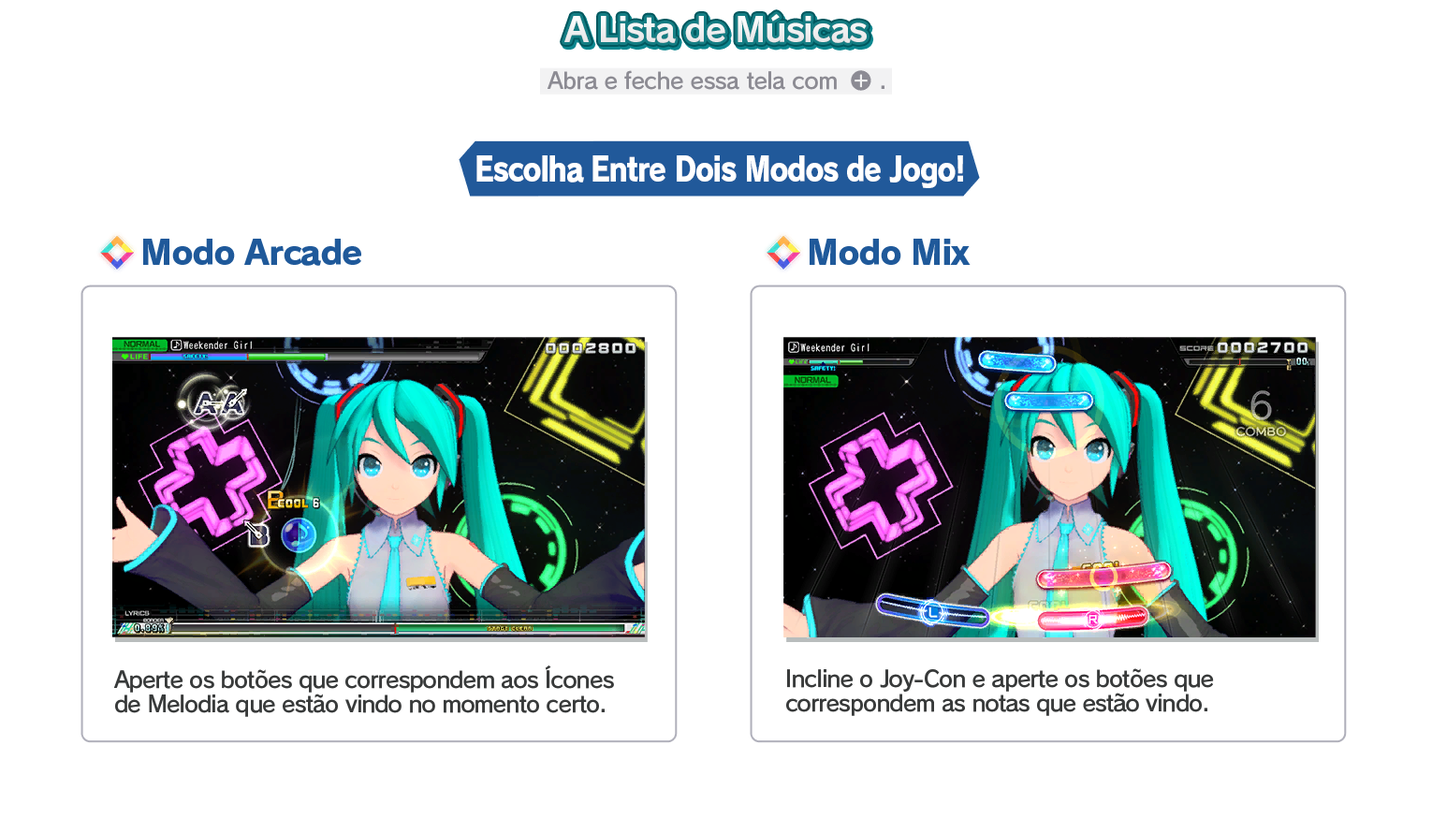
<style>
.page{position:relative;width:1432px;height:833px;background:#ffffff}
.page>*{position:absolute;margin:0}
.t1{font:33.7px "RodinPro-B";letter-spacing:-0.039em;color:#efeff0}
.t2{font:22.5px "RodinPro-DB";letter-spacing:-0.025em;color:#8c8b93}
.t3{font:33.7px "RodinPro-EB";letter-spacing:-0.048em;color:#ffffff;scale:0.85 1}
.t4{font:33.7px "RodinPro-EB";letter-spacing:-0.04em;color:#1f599a}
.t5{font:22.5px/23.7px "RodinPro-DB";letter-spacing:-0.04em;color:#383a3a}
</style>
<div class="page">
<p class="t1" style="left:564px;top:14px;width:303px;height:29px">A Lista de Músicas</p>
<p class="t2" style="left:547px;top:70px;width:290px;height:20px">Abra e feche essa tela com</p>
<p class="t2" style="left:881px;top:85px;width:3px;height:4px">.</p>
<p class="t3" style="left:476px;top:155px;width:487px;height:33px">Escolha Entre Dois Modos de Jogo!</p>
<p class="t4" style="left:143px;top:239px;width:218px;height:27px">Modo Arcade</p>
<p class="t4" style="left:809px;top:239px;width:161px;height:26px">Modo Mix</p>
<p class="t5" style="left:114px;top:665px;width:500px;height:52px">Aperte os botões que correspondem aos Ícones<br>de Melodia que estão vindo no momento certo.</p>
<p class="t5" style="left:786px;top:668px;width:428px;height:48px">Incline o Joy-Con e aperte os botões que<br>correspondem as notas que estão vindo.</p>
</div>
